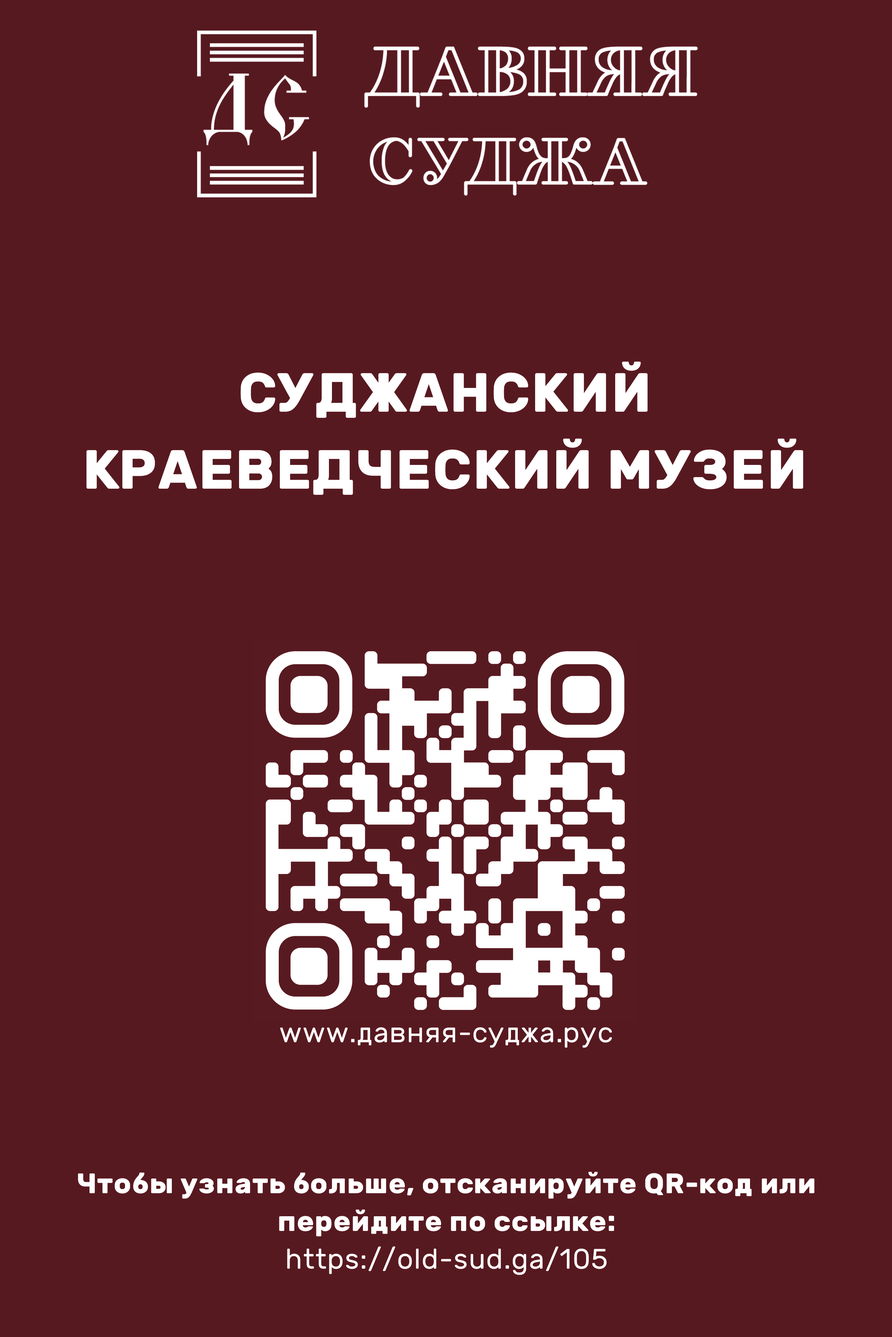
<style>
.page{position:relative;width:892px;height:1337px;background:#571920}
.page>*{position:absolute;margin:0}
.t1{font:55px/77.1px "Rubik-Bold";letter-spacing:0.025em;color:#ffffff;text-transform:uppercase}
.t2{font:28.3px "Rubik-Regular";letter-spacing:0.025em;color:#ffffff}
.t3{font:28.3px/37.7px "Rubik-Bold";letter-spacing:0.025em;color:#ffffff}
.t4{font:28.3px/37.7px "Rubik-Regular";letter-spacing:0.025em;color:#ffffff}
</style>
<div class="page">
<p class="t1" style="left:86px;top:362px;width:717px;height:133px;text-align:center">Суджанский краеведческий музей</p>
<p class="t2" style="left:280px;top:1027px;width:332px;height:21px">www.давняя-суджа.рус</p>
<p class="t3" style="left:78px;top:1172px;width:736px;height:103px;text-align:center">Чтобы узнать больше, отсканируйте QR-код или перейдите по ссылке:<br><span class="t4">https://old-sud.ga/105</span></p>
</div>
